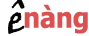
<style>
.page{position:relative;width:89px;height:36px;background:#ffffff}
.page>*{position:absolute;margin:0}
.t1{font:28px "Tahoma-Bold";color:#da5151;scale:0.94 1}
</style>
<div class="page">
<p class="t1" style="left:24px;top:4px;width:64px;height:30px">nàng</p>
</div>
